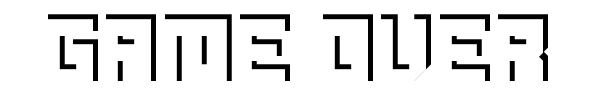
<style>
.page{position:relative;width:600px;height:100px;background:#ffffff}
.page>*{position:absolute;margin:0}
.t1{font:66.7px "Ode-to-Idle-Gaming";color:#ffffff}
</style>
<div class="page">
<p class="t1" style="left:43px;top:19px;width:500px;height:67px">Game over</p>
</div>
